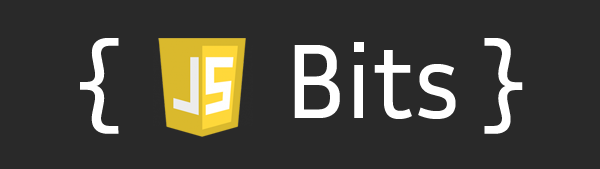
<style>
.page{position:relative;width:600px;height:169px;background:#292929}
.page>*{position:absolute;margin:0}
.t1{font:107.6px "InriaSans-Regular";color:#ffffff}
</style>
<div class="page">
<p class="t1" style="left:80px;top:38px;width:443px;height:96px">{       Bits }</p>
</div>
